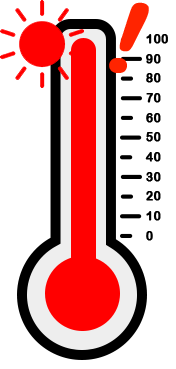
<style>
.page{position:relative;width:176px;height:369px;background:#ffffff}
.page>*{position:absolute;margin:0}
.t1{font:100px "ArialRoundedMTBold";color:#ff2400;font-weight:bold}
.t2{font:12.3px/19.7px "ArialRoundedMTBold";color:#000000;font-weight:bold}
</style>
<div class="page">
<p class="t1" style="left:109px;top:2px;width:40px;height:71px;rotate:22deg">!</p>
<p class="t2" style="left:145px;top:34px;width:23px;height:207px">100<br>90<br>80<br>70<br>60<br>50<br>40<br>30<br>20<br>10<br>0</p>
</div>
